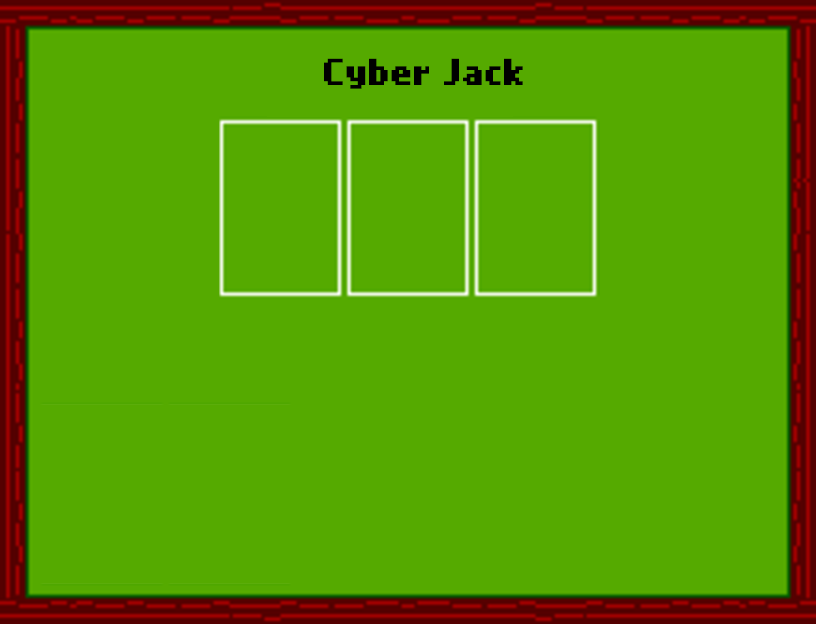
<style>
.page{position:relative;width:816px;height:624px;background:#55aa00}
.page>*{position:absolute;margin:0}
.t1{font:30px "NokiaCellphoneFC-Small";color:#000000}
</style>
<div class="page">
<p class="t1" style="left:324px;top:58px;width:199px;height:31px">Cyber Jack</p>
</div>
